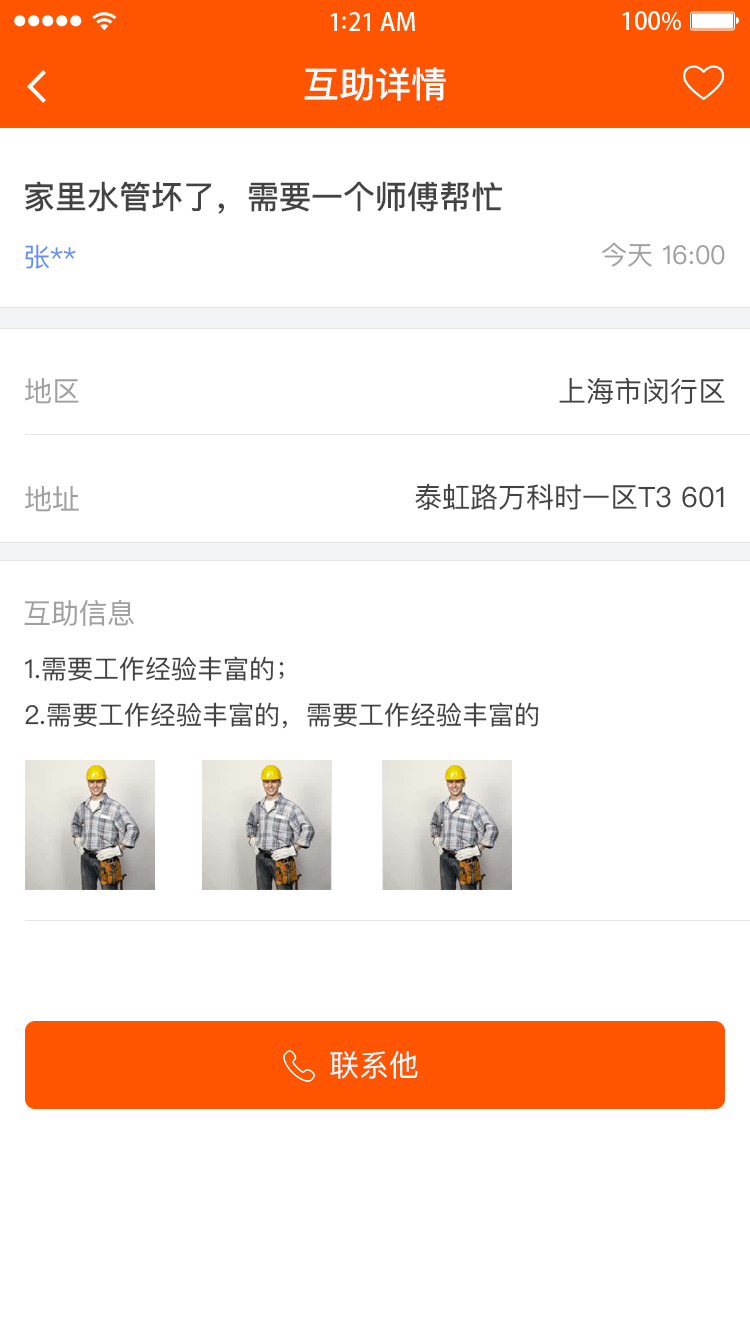
<style>
.page{position:relative;width:750px;height:1334px;background:#ffffff}
.page>*{position:absolute;margin:0}
.t1{font:36px "PingFangSC-Medium";color:#ffffff}
.t2{font:32px "PingFangSC-Medium";color:#434343}
.t3{font:26px "PingFangSC-Regular";color:#648df6}
.t4{font:26px "PingFangSC-Regular";color:#a0a0a0}
.t5{font:28px "PingFangSC-Regular";color:#434343}
.t6{font:28px "PingFangSC-Regular";color:#a0a0a0}
.t7{font:26px/50px "PingFangSC-Regular";color:#434343}
.t8{font:30px "PingFangSC-Regular";color:#ffffff;text-transform:uppercase}
</style>
<div class="page">
<p class="t1" style="left:304px;top:67px;width:142px;height:34px">互助详情</p>
<p class="t2" style="left:25px;top:181px;width:477px;height:33px">家里水管坏了，需要一个师傅帮忙</p>
<p class="t3" style="left:25px;top:244px;width:51px;height:25px">张**</p>
<p class="t4" style="left:602px;top:242px;width:123px;height:25px">今天 16:00</p>
<p class="t5" style="left:559px;top:377px;width:166px;height:27px">上海市闵行区</p>
<p class="t6" style="left:25px;top:378px;width:54px;height:26px">地区</p>
<p class="t6" style="left:25px;top:486px;width:54px;height:26px">地址</p>
<p class="t5" style="left:415px;top:483px;width:309px;height:27px">泰虹路万科时一区T3 601</p>
<p class="t6" style="left:24px;top:600px;width:110px;height:26px">互助信息</p>
<p class="t7" style="left:25px;top:656px;width:514px;height:73px">1.需要工作经验丰富的；<br>2.需要工作经验丰富的，需要工作经验丰富的</p>
<p class="t8" style="left:330px;top:1050px;width:88px;height:29px">联系他</p>
</div>
